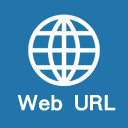
<style>
.page{position:relative;width:128px;height:128px;background:#2175aa}
.page>*{position:absolute;margin:0}
.t1{font:20.9px "HanWangHeiHeavy";color:#ffffff;scale:1.06 1}
</style>
<div class="page">
<p class="t1" style="left:17px;top:95px;width:99px;height:16px">Web URL</p>
</div>
